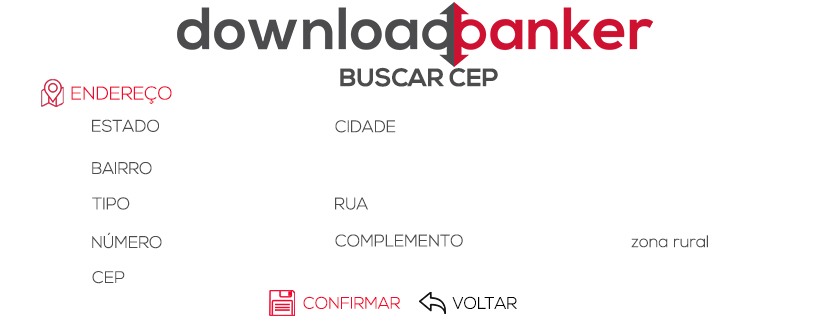
<style>
.page{position:relative;width:830px;height:325px;background:#ffffff}
.page>*{position:absolute;margin:0}
.t1{font:25px "NexaBold";color:#4c4c4c}
.t2{font:18.5px "NexaLight";color:#f0082e}
.t3{font:16.7px "NexaLight";color:#4c4c4c}
.t4{font:16.7px "NexaLight";color:#f0082e}
.t5{font:16.7px "NexaLight";color:#000000}
</style>
<div class="page">
<p class="t1" style="left:340px;top:67px;width:158px;height:20px">BUSCAR CEP</p>
<p class="t2" style="left:71px;top:86px;width:101px;height:18px">ENDEREÇO</p>
<p class="t3" style="left:92px;top:119px;width:67px;height:13px">ESTADO</p>
<p class="t3" style="left:335px;top:120px;width:61px;height:13px">CIDADE</p>
<p class="t3" style="left:92px;top:162px;width:60px;height:13px">BAIRRO</p>
<p class="t3" style="left:92px;top:197px;width:38px;height:13px">TIPO</p>
<p class="t3" style="left:335px;top:197px;width:33px;height:13px">RUA</p>
<p class="t3" style="left:92px;top:232px;width:70px;height:17px">NÚMERO</p>
<p class="t3" style="left:335px;top:234px;width:128px;height:13px">COMPLEMENTO</p>
<p class="t3" style="left:631px;top:235px;width:77px;height:13px">zona rural</p>
<p class="t3" style="left:92px;top:271px;width:33px;height:13px">CEP</p>
<p class="t4" style="left:303px;top:296px;width:98px;height:13px">CONFIRMAR</p>
<p class="t5" style="left:452px;top:296px;width:65px;height:13px">VOLTAR</p>
</div>
